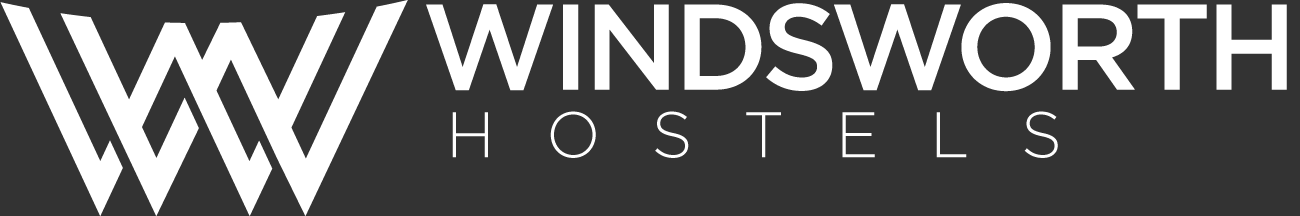
<style>
.page{position:relative;width:1300px;height:216px;background:#333333}
.page>*{position:absolute;margin:0}
.t1{font:121.6px "Gotham-Medium";letter-spacing:-0.05em;color:#ffffff;text-transform:uppercase}
.t2{font:64.2px "Gotham-Light";letter-spacing:0.8em;color:#ffffff;text-transform:uppercase}
</style>
<div class="page">
<p class="t1" style="left:426px;top:3px;width:861px;height:89px">windsworth</p>
<p class="t2" style="left:452px;top:111px;width:606px;height:47px">hostels</p>
</div>
